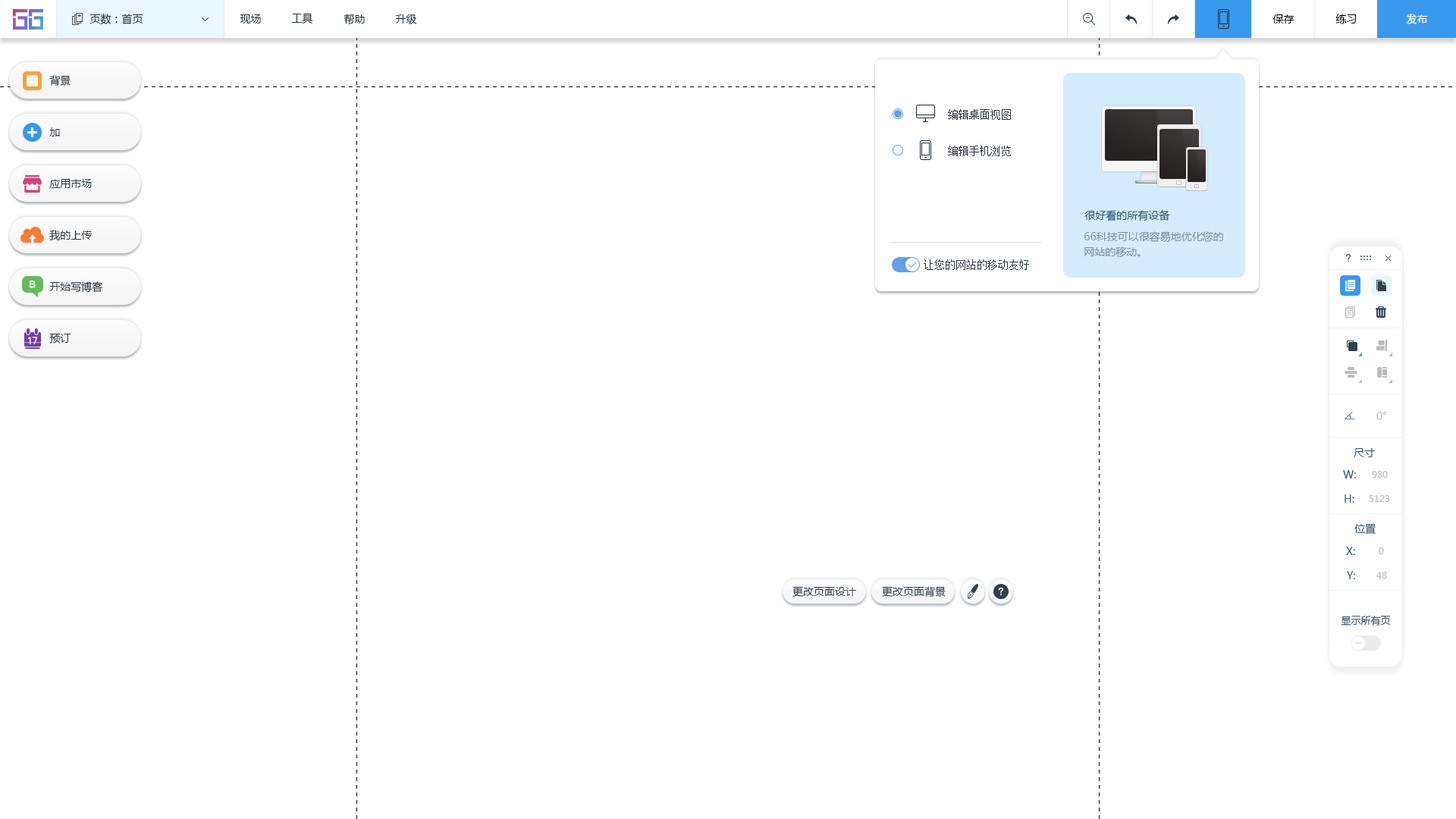
<style>
.page{position:relative;width:1456px;height:819px;background:#ffffff}
.page>*{position:absolute;margin:0}
.t1{font:10.6px "MicrosoftYaHei";color:#20303c}
.t2{font:10.6px "MicrosoftYaHei";color:#000000}
.t3{font:10.6px "MicrosoftYaHei";color:#ffffff}
.t4{font:10.6px "MicrosoftYaHei";color:#283a48}
.t5{font:10.6px "SimSun";color:#2a3742}
.t6{font:10.6px "MicrosoftYaHei";color:#2b5672}
.t7{font:10.6px/15.2px "MicrosoftYaHei";color:#7a92a5}
.t8{font:10.6px "MicrosoftYaHei";color:#bcbcbc}
.t9{font:9.1px "MicrosoftYaHei";color:#bcbcbc}
.t10{font:10.6px "MicrosoftYaHei";color:#2d4150}
.t11{font:9.9px "MicrosoftYaHei";color:#2b5672}
</style>
<div class="page">
<p class="t1" style="left:89px;top:14px;width:54px;height:11px">页数：首页</p>
<p class="t1" style="left:240px;top:14px;width:21px;height:10px">现场</p>
<p class="t1" style="left:291px;top:13px;width:22px;height:11px">工具</p>
<p class="t1" style="left:344px;top:14px;width:21px;height:11px">帮助</p>
<p class="t1" style="left:395px;top:14px;width:22px;height:10px">升级</p>
<p class="t2" style="left:1272px;top:14px;width:22px;height:10px">保存</p>
<p class="t2" style="left:1335px;top:14px;width:22px;height:10px">练习</p>
<p class="t3" style="left:1406px;top:14px;width:22px;height:10px">发布</p>
<p class="t4" style="left:49px;top:75px;width:22px;height:11px">背景</p>
<p class="t5" style="left:948px;top:109px;width:63px;height:11px">编辑桌面视图</p>
<p class="t4" style="left:49px;top:127px;width:11px;height:9px">加</p>
<p class="t5" style="left:948px;top:146px;width:63px;height:10px">编辑手机浏览</p>
<p class="t4" style="left:49px;top:179px;width:43px;height:9px">应用市场</p>
<p class="t6" style="left:1084px;top:210px;width:86px;height:11px">很好看的所有设备</p>
<p class="t4" style="left:49px;top:230px;width:44px;height:11px">我的上传</p>
<p class="t7" style="left:1084px;top:231px;width:139px;height:27px">66科技可以很容易地优化您的<br>网站的移动。</p>
<p class="t5" style="left:924px;top:259px;width:105px;height:11px">让您的网站的移动友好</p>
<p class="t4" style="left:49px;top:281px;width:54px;height:12px">开始写博客</p>
<p class="t4" style="left:49px;top:333px;width:22px;height:11px">预订</p>
<p class="t8" style="left:1376px;top:412px;width:11px;height:8px">0°</p>
<p class="t6" style="left:1354px;top:448px;width:21px;height:9px">尺寸</p>
<p class="t6" style="left:1343px;top:470px;width:13px;height:9px">W:</p>
<p class="t9" style="left:1372px;top:471px;width:16px;height:7px">980</p>
<p class="t6" style="left:1345px;top:494px;width:9px;height:9px">H:</p>
<p class="t9" style="left:1369px;top:495px;width:21px;height:7px">5123</p>
<p class="t6" style="left:1354px;top:523px;width:22px;height:11px">位置</p>
<p class="t6" style="left:1346px;top:547px;width:9px;height:8px">X:</p>
<p class="t9" style="left:1379px;top:548px;width:5px;height:6px">0</p>
<p class="t6" style="left:1347px;top:571px;width:8px;height:8px">Y:</p>
<p class="t9" style="left:1376px;top:572px;width:11px;height:7px">48</p>
<p class="t10" style="left:792px;top:586px;width:64px;height:11px">更改页面设计</p>
<p class="t10" style="left:882px;top:586px;width:64px;height:11px">更改页面背景</p>
<p class="t11" style="left:1341px;top:615px;width:50px;height:11px">显示所有页</p>
</div>
